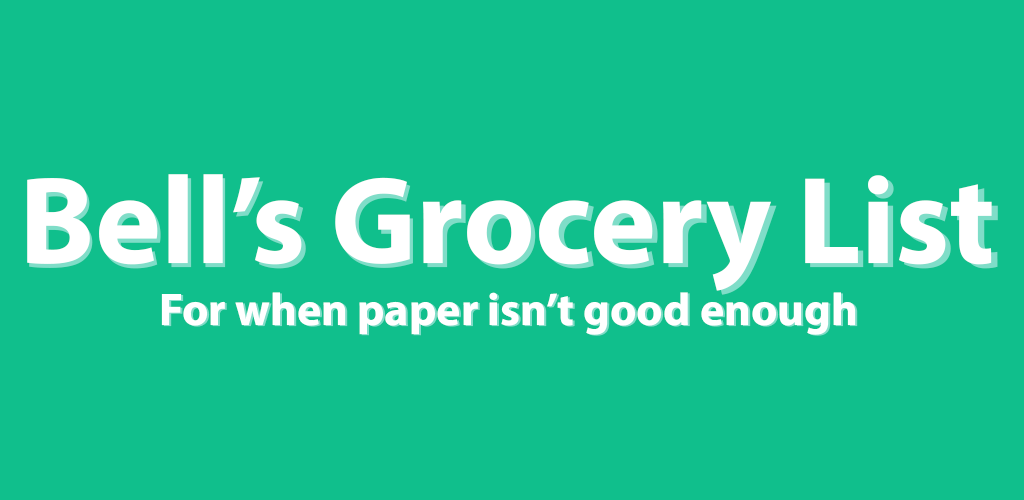
<style>
.page{position:relative;width:1024px;height:500px;background:#10bf8c}
.page>*{position:absolute;margin:0}
.t1{font:125px "MyriadConceptRoman-Bold";color:#ffffff}
.t2{font:125px "MyriadConceptRoman_725.000wght_100.000wdth";color:#ffffff}
.t3{font:45.8px "MyriadConceptRoman_725.000wght_100.000wdth";color:#ffffff}
.t4{font:45.8px "MyriadConceptRoman_720.000wght_100.000wdth";color:#ffffff}
</style>
<div class="page">
<p class="t1" style="left:27px;top:174px;width:965px;height:117px">Bell’s Grocery List</p>
<p class="t2" style="left:29px;top:178px;width:969px;height:117px">Bell’s Grocery List</p>
<p class="t3" style="left:161px;top:292px;width:695px;height:43px">For when paper isn’t good enough</p>
<p class="t4" style="left:163px;top:293px;width:695px;height:43px">For when paper isn’t good enough</p>
</div>
